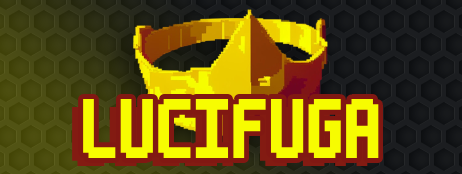
<style>
.page{position:relative;width:462px;height:174px}
.page>*{position:absolute;margin:0}
.t1{font:85.9px "m6x11";color:#f7fc01;text-transform:uppercase}
</style>
<div class="page">
<p class="t1" style="left:83px;top:99px;width:296px;height:59px">Lucifuga</p>
</div>
